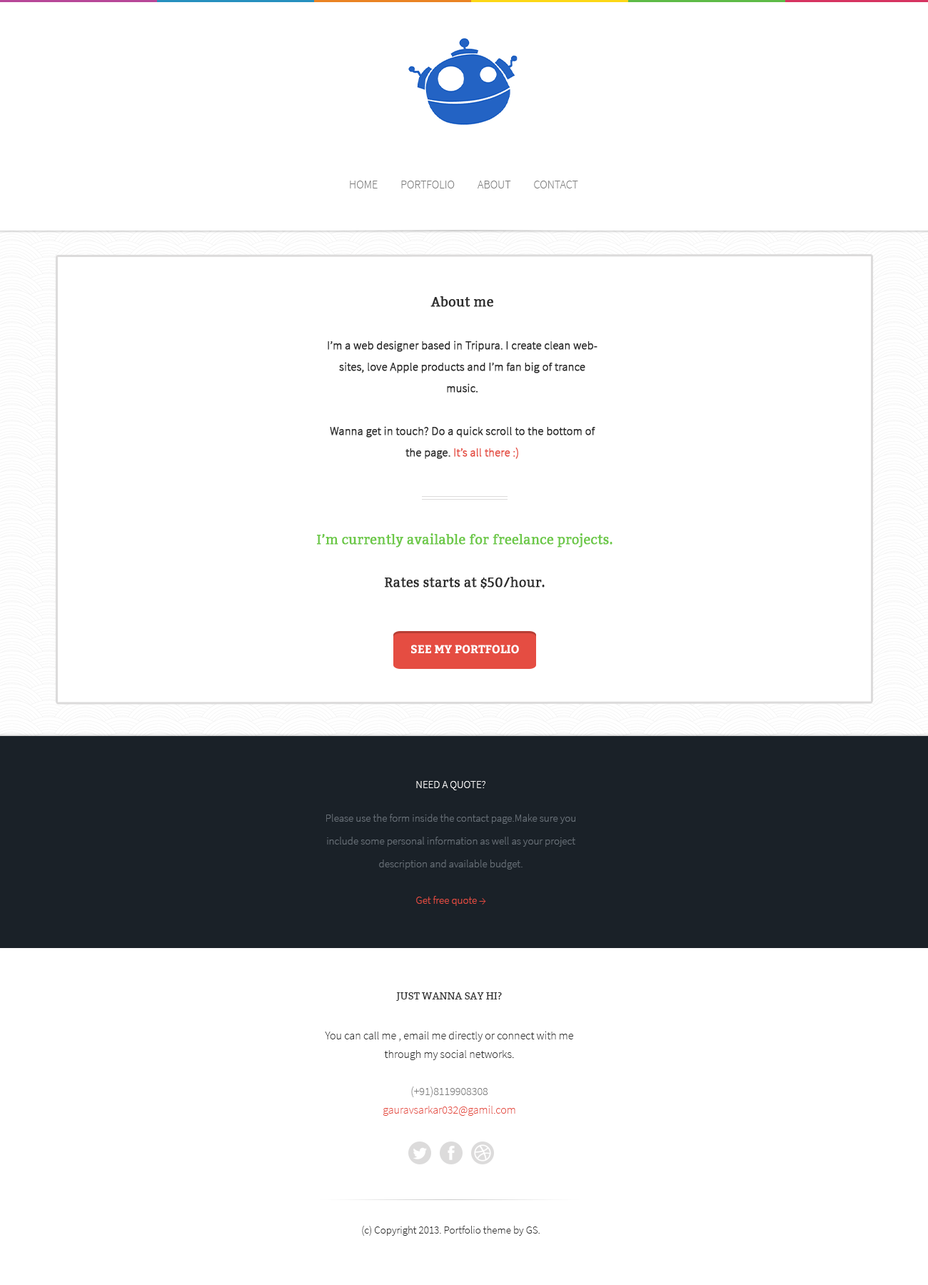
<style>
.page{position:relative;width:928px;height:1285px;background:#ffffff}
.page>*{position:absolute;margin:0}
.t1{font:11.4px "SourceSansPro-Light";color:#7a7a7a;text-transform:uppercase}
.t2{font:11.4px/21.4px "SourceSansPro-Light";color:#2b2b2b;font-weight:bold}
.t3{font:12.8px/21.4px "Bitter-Regular";color:#2b2b2b;font-weight:bold}
.t4{font:11.4px/21.4px "SourceSansPro-Light";color:#e54d42;font-weight:bold}
.t5{font:12.8px/21.4px "Bitter-Regular";color:#6bc846;font-weight:bold}
.t6{font:11.4px "Bitter-Bold";color:#fefefe;text-transform:uppercase}
.t7{font:10.7px/22.8px "SourceSansPro-Light";color:#687078}
.t8{font:10.7px/10.7px "SourceSansPro-Light";color:#fefefe;text-transform:uppercase}
.t9{font:10.7px/15px "SourceSansPro-Light";color:#e54d42}
.t10{font:11.4px/18.6px "SourceSansPro-Light";color:#2b2b2b}
.t11{font:10px/21.4px "Bitter-Regular";color:#2b2b2b;text-transform:uppercase}
.t12{font:11.4px/18.6px "SourceSansPro-Light";color:#2b2b2b;text-transform:uppercase}
.t13{font:11.4px/18.6px "SourceSansPro-Light";color:#7a7a7a}
.t14{font:11.4px/18.6px "SourceSansPro-Light";color:#e54d42}
.t15{font:10.7px "SourceSansPro-Light";color:#2b2b2b}
</style>
<div class="page">
<p class="t1" style="left:350px;top:181px;width:228px;height:7px">HOME          PORTFOLIO          ABOUT          CONTACT</p>
<p class="t2" style="left:328px;top:296px;width:269px;height:163px;text-align:center"><span class="t3">About me<br><br></span>I’m a web designer based in Tripura. I create clean websites, love Apple products and I’m fan big of trance music.<br><br>Wanna get in touch? Do a quick scroll to the bottom of the page. <span class="t4">It’s all there :)</span></p>
<p class="t5" style="left:317px;top:533px;width:295px;height:56px;text-align:center">I’m currently available for freelance projects.<br><span class="t3"><br>Rates starts at $50/hour.</span></p>
<p class="t6" style="left:411px;top:645px;width:108px;height:9px">see my portfolio</p>
<p class="t7" style="left:326px;top:781px;width:249px;height:125px;text-align:center"><span class="t8">Need a Quote?<br><br></span>Please use the form inside the contact page.Make sure you include some personal information as well as your project description and available budget.<br><br><span class="t9">Get free quote →</span></p>
<p class="t10" style="left:325px;top:992px;width:248px;height:124px;text-align:center"><span class="t11">JUST WANNA SAY HI?<br><br></span><span class="t12">Y</span>ou can call me , email me directly or connect with me through my social networks.<br><br><span class="t13">(+91)8119908308<br></span><span class="t14">gauravsarkar032@gamil.com</span></p>
<p class="t15" style="left:362px;top:1226px;width:178px;height:10px">(c) Copyright 2013. Portfolio theme by GS.</p>
</div>
